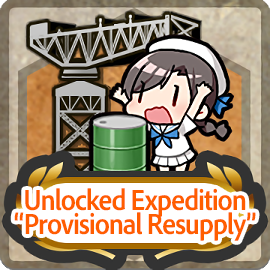
<style>
.page{position:relative;width:270px;height:270px}
.page>*{position:absolute;margin:0}
.t1{font:30px/24px "AdobeClean-Bold";letter-spacing:-0.04em;color:#ff5d00;scale:0.9 1}
</style>
<div class="page">
<p class="t1" style="left:14px;top:188px;width:242px;height:53px;text-align:center">Unlocked Expedition<br>“Provisional Resupply”</p>
</div>
